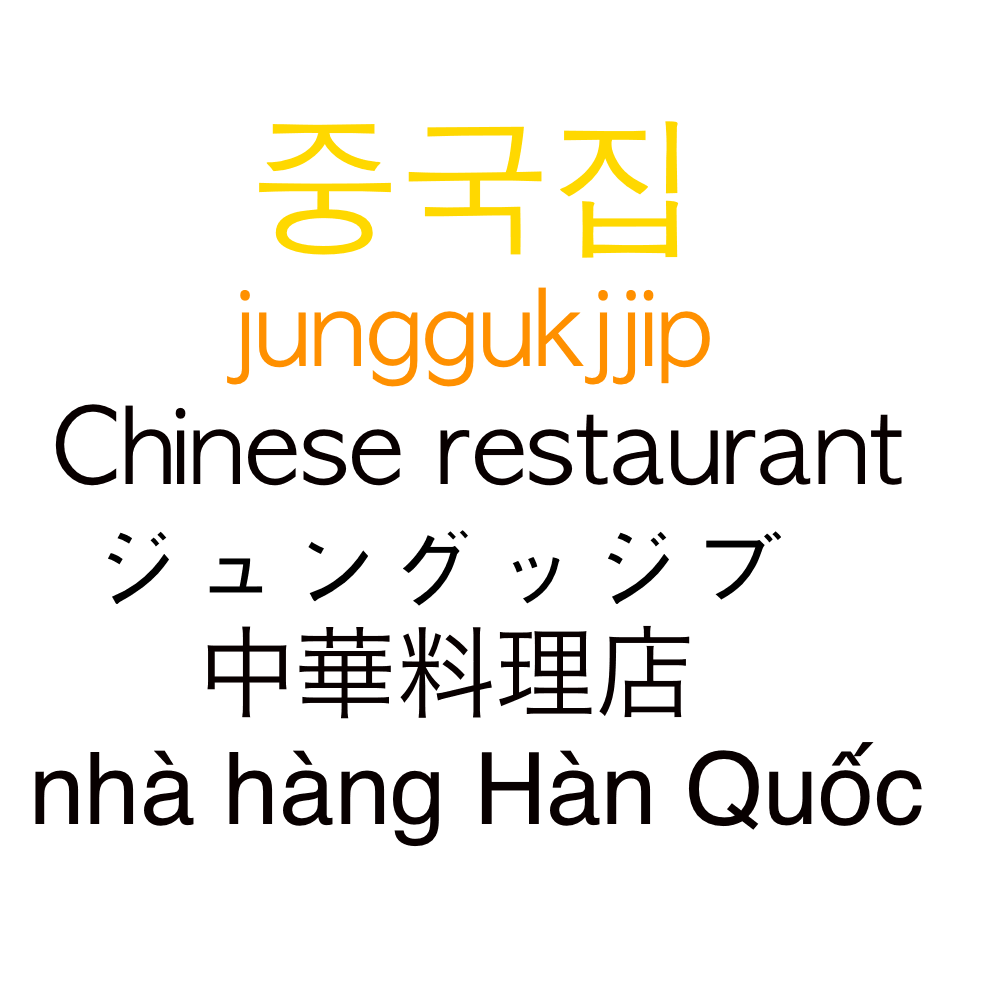
<style>
.page{position:relative;width:1000px;height:1000px;background:#ffffff}
.page>*{position:absolute;margin:0}
.t1{font:150px "AppleGothic";color:#ffd800}
.t2{font:100px "AppleGothic";color:#ff9000}
.t3{font:100px "AppleGothic";color:#080000}
.t4{font:100px "AppleGothic";color:#000000}
.t5{font:100px "HiraKakuProN-W3";color:#080000}
.t6{font:100px "Helvetica";color:#080000}
</style>
<div class="page">
<p class="t1" style="left:259px;top:121px;width:420px;height:137px">중국집</p>
<p class="t2" style="left:227px;top:287px;width:483px;height:100px">junggukjjip</p>
<p class="t3" style="left:55px;top:404px;width:847px;height:82px">Chinese restaurant</p>
<p class="t4" style="left:108px;top:530px;width:673px;height:76px">ジュングッジブ</p>
<p class="t5" style="left:207px;top:625px;width:483px;height:94px">中華料理店</p>
<p class="t6" style="left:35px;top:742px;width:887px;height:105px">nhà hàng Hàn Quốc</p>
</div>
